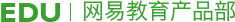
<style>
.page{position:relative;width:235px;height:22px;background:#ffffff}
.page>*{position:absolute;margin:0}
.t1{font:28px "GillSansMT-Bold";color:#39a030}
.t2{font:22px "HiraginoSansGB-W3";color:#39a030}
</style>
<div class="page">
<p class="t1" style="left:1px;top:3px;width:59px;height:19px">EDU</p>
<p class="t2" style="left:83px;top:0px;width:152px;height:22px">网易教育产品部</p>
</div>
